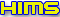
<style>
.page{position:relative;width:60px;height:17px;background:#e9f106}
.page>*{position:absolute;margin:0}
.t1{font:16.6px "SFAutomatonExtended";letter-spacing:0.075em;color:#e9f106;scale:1.12 1}
</style>
<div class="page">
<p class="t1" style="left:1px;top:2px;width:58px;height:12px">HIMS</p>
</div>
